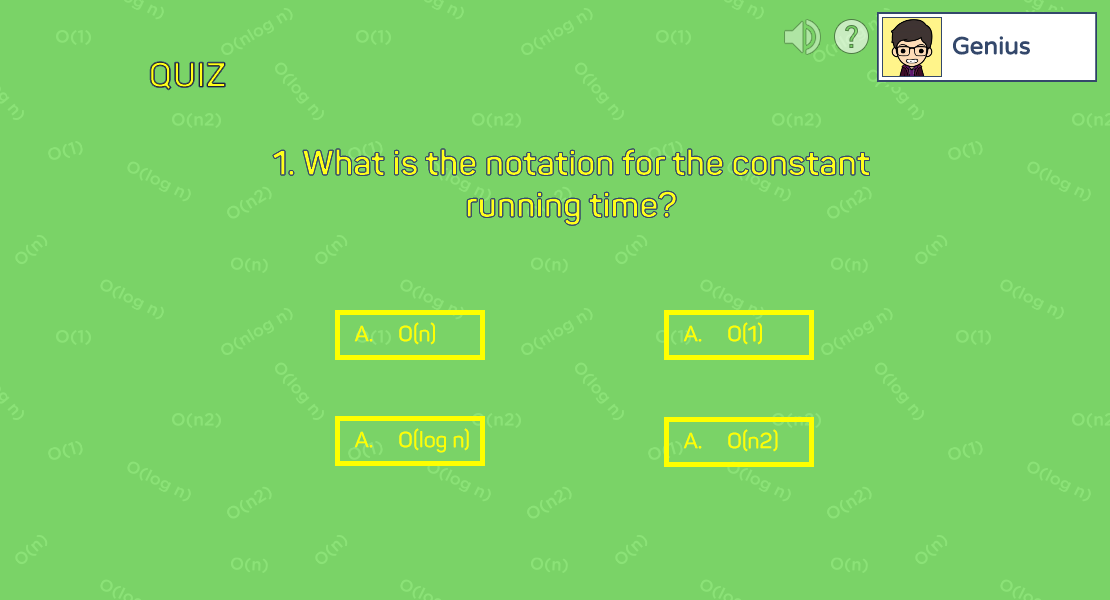
<style>
.page{position:relative;width:1110px;height:600px;background:#7ad367}
.page>*{position:absolute;margin:0}
.t1{font:35px "Panton-Bold"}
.t2{font:35px "Panton-Bold";color:#ffff1c}
.t3{font:22px "Panton-SemiBold";color:#ffff00}
</style>
<div class="page">
<p class="t1" style="left:150px;top:61px;width:76px;height:29px">QUIZ</p>
<p class="t2" style="left:273px;top:149px;width:597px;height:77px;text-align:center">1. What is the notation for the constant running time?</p>
<p class="t3" style="left:354px;top:322px;width:81px;height:23px">A.     O(n)</p>
<p class="t3" style="left:683px;top:322px;width:79px;height:23px">A.     O(1)</p>
<p class="t3" style="left:354px;top:428px;width:115px;height:25px">A.     O(log n)</p>
<p class="t3" style="left:683px;top:429px;width:95px;height:23px">A.     O(n2)</p>
</div>
